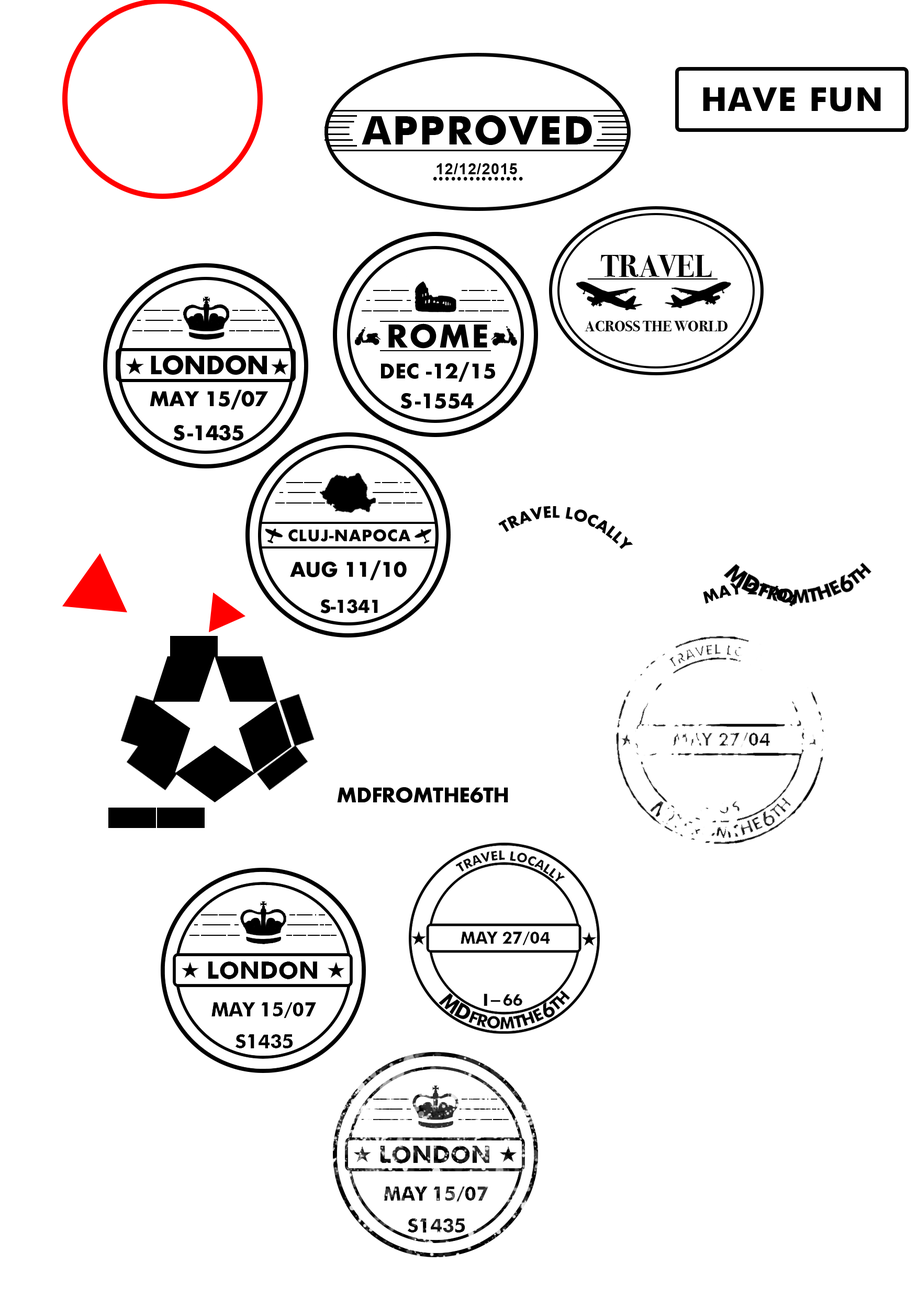
<style>
.page{position:relative;width:918px;height:1298px;background:#ffffff}
.page>*{position:absolute;margin:0}
.t1{font:32.7px "Futura-Bold";letter-spacing:0.04em;color:#000000}
.t2{font:15.3px "Arial-BoldMT";letter-spacing:0.04em;color:#000000}
.t3{font:30.5px "BodoniSvtyTwoITCTT-Bold";color:#000000}
.t4{font:30.5px "Futura-Bold";letter-spacing:0.04em;color:#000000}
.t5{font:15.3px "BodoniSvtyTwoITCTT-Bold";color:#000000}
.t6{font:24.4px "Futura-Bold";letter-spacing:-0.02em;color:#000000}
.t7{font:19.7px "Futura-Bold";color:#000000}
.t8{font:19.7px "Futura-Bold";letter-spacing:-0.02em;color:#000000}
.t9{font:19.7px "Futura-Bold";letter-spacing:0.12em;color:#000000}
.t10{font:19.7px "Futura-Bold";letter-spacing:0.1em;color:#000000}
.t11{font:15.3px "Futura-Bold";letter-spacing:-0.02em;color:#000000}
.t12{font:15.3px "Futura-Bold";letter-spacing:0.04em;color:#000000}
.t13{font:19.6px "Futura-Bold";letter-spacing:-0.02em;color:#000000}
.t14{font:17.5px "Futura-Bold";letter-spacing:-0.02em;color:#000000}
</style>
<div class="page">
<p class="t1" style="left:703px;top:87px;width:178px;height:25px">HAVE FUN</p>
<p class="t2" style="left:437px;top:163px;width:80px;height:11px">12/12/2015</p>
<p class="t3" style="left:601px;top:255px;width:111px;height:22px">TRAVEL</p>
<p class="t4" style="left:388px;top:324px;width:99px;height:25px">ROME</p>
<p class="t5" style="left:585px;top:321px;width:143px;height:10px">ACROSS THE WORLD</p>
<p class="t6" style="left:151px;top:355px;width:116px;height:20px">LONDON</p>
<p class="t7" style="left:381px;top:362px;width:114px;height:20px">DEC -12/15</p>
<p class="t8" style="left:150px;top:390px;width:119px;height:20px">MAY 15/07</p>
<p class="t7" style="left:401px;top:393px;width:73px;height:16px"><span class="t9">S</span>-1554</p>
<p class="t8" style="left:173px;top:425px;width:70px;height:16px"><span class="t10">S</span>-1435</p>
<p class="t11" style="left:498px;top:506px;width:135px;height:43px;rotate:-33deg">TRAVEL LOCALLY</p>
<p class="t12" style="left:288px;top:529px;width:123px;height:13px">CLUJ-NAPOCA</p>
<p class="t13" style="left:290px;top:560px;width:117px;height:21px">AUG 11/10</p>
<p class="t11" style="left:703px;top:582px;width:95px;height:25px">MAY 27/04</p>
<p class="t14" style="left:320px;top:599px;width:58px;height:15px">S-1341</p>
<p class="t8" style="left:337px;top:787px;width:171px;height:16px">MDFROMTHE6TH</p>
</div>
